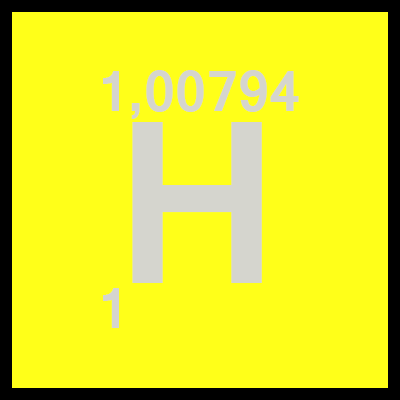
<style>
.page{position:relative;width:400px;height:400px;background:#ffff19}
.page>*{position:absolute;margin:0}
.t1{font:62.5px "Latha-Bold";color:#d5d5ce}
.t2{font:250px "Latha-Bold";color:#d5d5ce}
</style>
<div class="page">
<p class="t1" style="left:103px;top:70px;width:196px;height:49px">1,00794</p>
<p class="t2" style="left:132px;top:122px;width:130px;height:161px">H</p>
<p class="t1" style="left:103px;top:288px;width:16px;height:40px">1</p>
</div>
